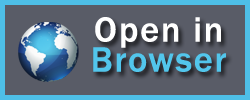
<style>
.page{position:relative;width:250px;height:100px;background:#595c67}
.page>*{position:absolute;margin:0}
.t1{font:36.2px/30px "FranklinGothic-Medium";letter-spacing:0.025em;color:#ffffff;font-weight:bold}
.t2{font:36.2px/30px "FranklinGothic-Medium";letter-spacing:0.025em;color:#52c6ec;font-weight:bold}
</style>
<div class="page">
<p class="t1" style="left:93px;top:17px;width:133px;height:55px;text-align:center">Open in <br><span class="t2">Browser</span></p>
</div>
